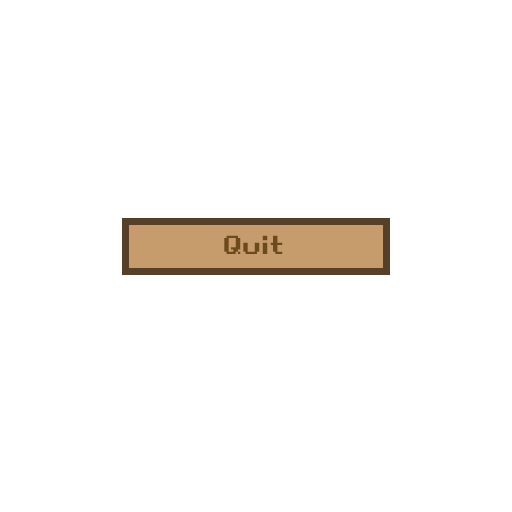
<style>
.page{position:relative;width:512px;height:512px;background:#ffffff}
.page>*{position:absolute;margin:0}
.t1{font:25px "RetroGaming";color:#6b4b1d}
</style>
<div class="page">
<p class="t1" style="left:224px;top:235px;width:59px;height:19px">Quit</p>
</div>
